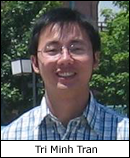
<style>
.page{position:relative;width:130px;height:158px}
.page>*{position:absolute;margin:0}
.t1{font:10px "Verdana";letter-spacing:-0.015em;color:#000000}
</style>
<div class="page">
<p class="t1" style="left:35px;top:145px;width:62px;height:8px">Tri Minh Tran</p>
</div>
